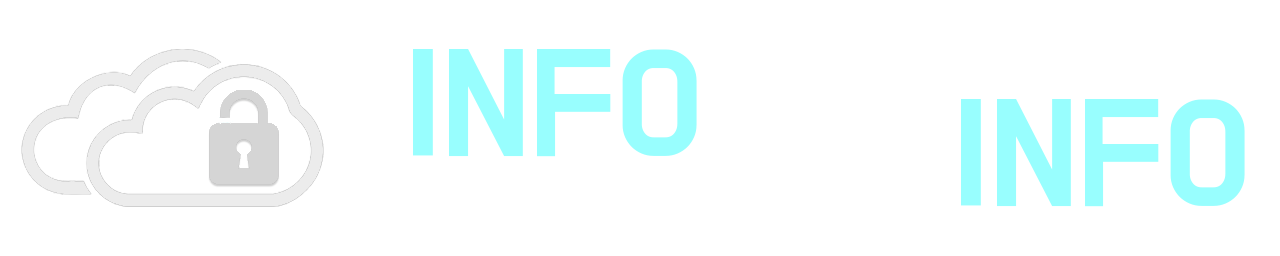
<style>
.page{position:relative;width:1280px;height:256px;background:#ffffff}
.page>*{position:absolute;margin:0}
.t1{font:125px "BMDoHyeon";color:#98fefe}
</style>
<div class="page">
<p class="t1" style="left:413px;top:49px;width:284px;height:108px">INFO</p>
<p class="t1" style="left:961px;top:99px;width:284px;height:108px">INFO</p>
</div>
